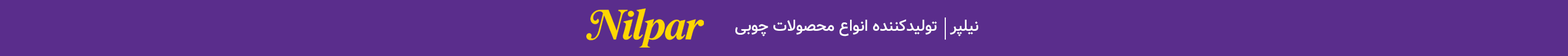
<style>
.page{position:relative;width:1568px;height:56px;background:#5a2d8c}
.page>*{position:absolute;margin:0}
.t1{font:15.7px "Vazir-Medium";color:#ffffff;font-variant:small-caps}
</style>
<div class="page">
<p class="t1" style="left:735px;top:19px;width:243px;height:17px">نیلپر   تولیدکننده انواع محصولات چوبی</p>
</div>
